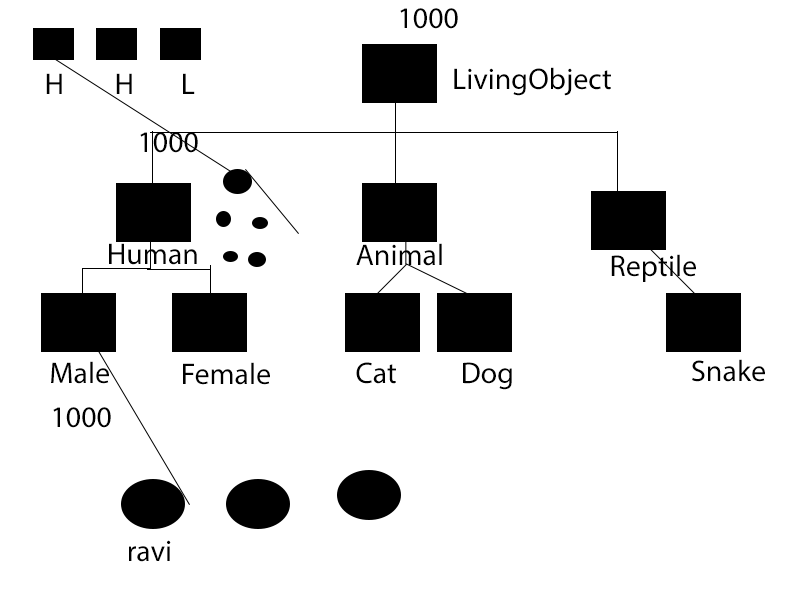
<style>
.page{position:relative;width:800px;height:600px;background:#ffffff}
.page>*{position:absolute;margin:0}
.t1{font:30px "MyriadHebrew-Regular";color:#000000}
</style>
<div class="page">
<p class="t1" style="left:400px;top:8px;width:58px;height:21px">1000</p>
<p class="t1" style="left:46px;top:73px;width:16px;height:21px">H</p>
<p class="t1" style="left:116px;top:73px;width:16px;height:21px">H</p>
<p class="t1" style="left:183px;top:73px;width:12px;height:21px">L</p>
<p class="t1" style="left:454px;top:67px;width:157px;height:29px">LivingObject</p>
<p class="t1" style="left:140px;top:132px;width:58px;height:21px">1000</p>
<p class="t1" style="left:109px;top:243px;width:88px;height:22px">Human</p>
<p class="t1" style="left:356px;top:243px;width:86px;height:23px">Animal</p>
<p class="t1" style="left:611px;top:254px;width:85px;height:28px">Reptile</p>
<p class="t1" style="left:51px;top:361px;width:58px;height:23px">Male</p>
<p class="t1" style="left:183px;top:362px;width:87px;height:23px">Female</p>
<p class="t1" style="left:356px;top:362px;width:40px;height:22px">Cat</p>
<p class="t1" style="left:463px;top:362px;width:49px;height:28px">Dog</p>
<p class="t1" style="left:692px;top:359px;width:73px;height:23px">Snake</p>
<p class="t1" style="left:53px;top:407px;width:58px;height:21px">1000</p>
<p class="t1" style="left:129px;top:540px;width:42px;height:22px">ravi</p>
</div>
